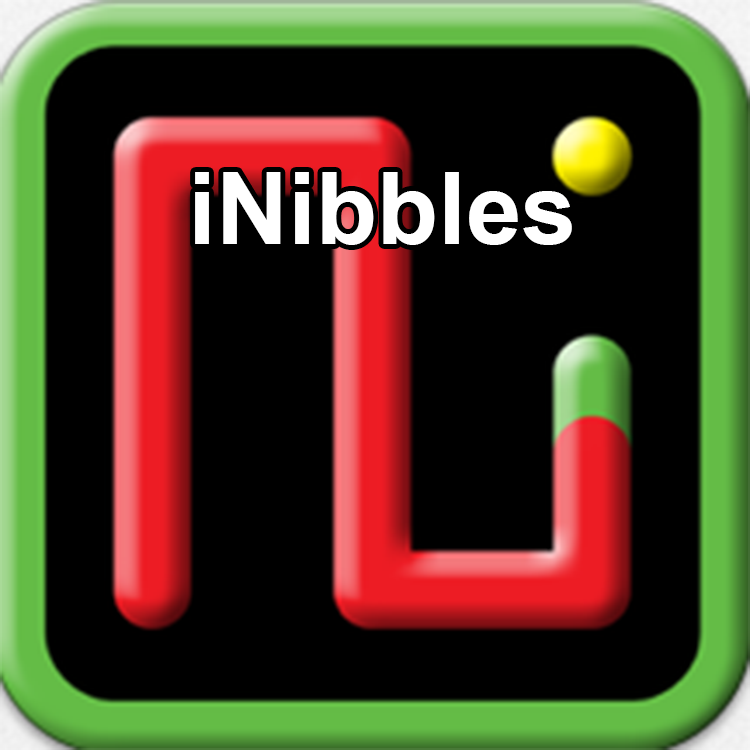
<style>
.page{position:relative;width:750px;height:750px;background:#000000}
.page>*{position:absolute;margin:0}
.t1{font:100px "Arial-BoldMT";color:#ffffff}
</style>
<div class="page">
<p class="t1" style="left:195px;top:172px;width:377px;height:73px">iNibbles</p>
</div>
